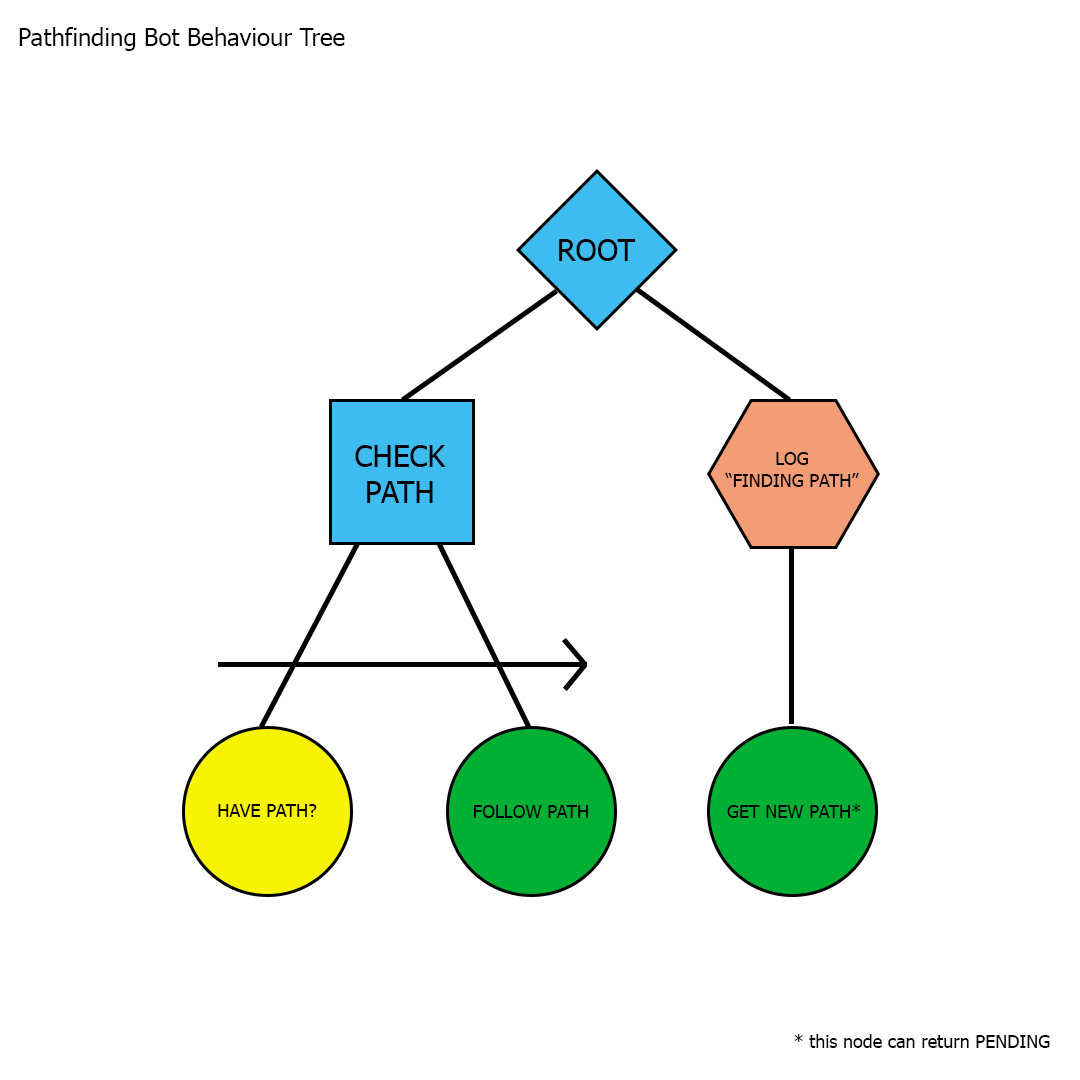
<style>
.page{position:relative;width:1080px;height:1080px;background:#ffffff}
.page>*{position:absolute;margin:0}
.t1{font:24px "Tahoma";color:#000000}
.t2{font:30px "Tahoma";color:#000000}
.t3{font:18px "Tahoma";color:#000000}
</style>
<div class="page">
<p class="t1" style="left:19px;top:27px;width:326px;height:24px">Pathfinding Bot Behaviour Tree</p>
<p class="t2" style="left:559px;top:239px;width:76px;height:22px">ROOT</p>
<p class="t2" style="left:355px;top:445px;width:91px;height:58px;text-align:center">CHECK<br>PATH</p>
<p class="t3" style="left:725px;top:452px;width:134px;height:35px;text-align:center">LOG<br>“FINDING PATH”</p>
<p class="t3" style="left:218px;top:804px;width:99px;height:13px">HAVE PATH?</p>
<p class="t3" style="left:473px;top:805px;width:115px;height:13px">FOLLOW PATH</p>
<p class="t3" style="left:727px;top:804px;width:133px;height:14px">GET NEW PATH*</p>
<p class="t3" style="left:794px;top:1034px;width:256px;height:14px">* this node can return PENDING</p>
</div>
